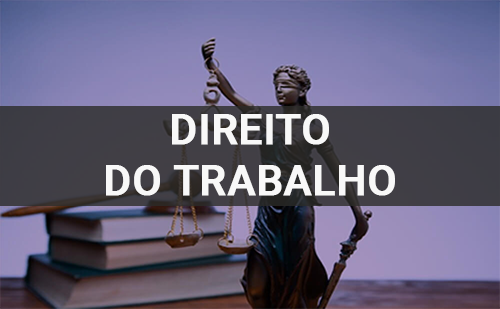
<style>
.page{position:relative;width:500px;height:309px}
.page>*{position:absolute;margin:0}
.t1{font:42px "Roboto-Medium";color:#f8f8f8;font-weight:bold}
</style>
<div class="page">
<p class="t1" style="left:106px;top:114px;width:289px;height:82px;text-align:center">DIREITO<br>DO TRABALHO</p>
</div>
